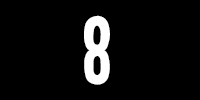
<style>
.page{position:relative;width:200px;height:100px;background:#000000}
.page>*{position:absolute;margin:0}
.t1{font:102.6px "SingleSleeve";letter-spacing:0.025em;color:#ffffff;scale:0.94 1}
</style>
<div class="page">
<p class="t1" style="left:84px;top:15px;width:26px;height:70px">8</p>
</div>
